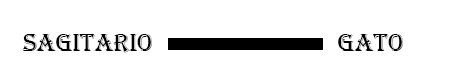
<style>
.page{position:relative;width:470px;height:76px;background:#ffffff}
.page>*{position:absolute;margin:0}
.t1{font:25px "Algerian";color:#000000}
</style>
<div class="page">
<p class="t1" style="left:22px;top:34px;width:130px;height:19px">Sagitario</p>
<p class="t1" style="left:338px;top:34px;width:65px;height:17px">Gato</p>
</div>
